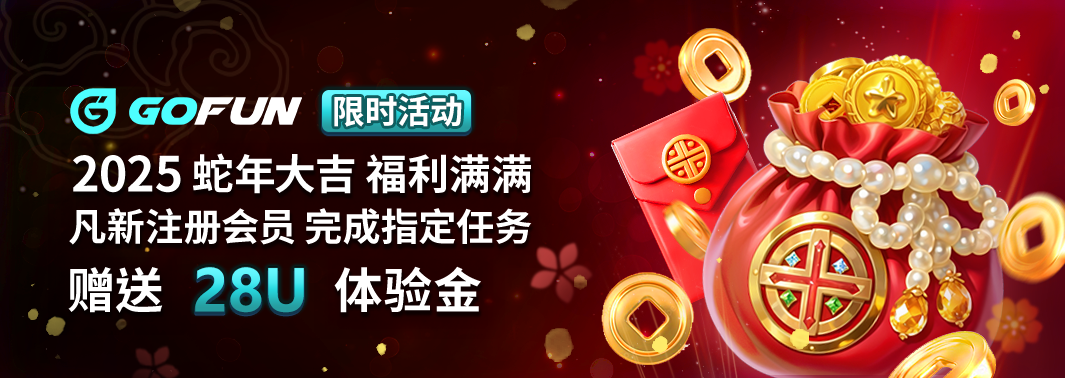
<style>
.page{position:relative;width:1065px;height:378px}
.page>*{position:absolute;margin:0}
.t1{font:32.9px "NotoSansCJKtc-Bold";letter-spacing:-0.01em;color:#ffffff}
.t2{font:41.8px "NotoSansCJKtc-Bold";letter-spacing:-0.01em;color:#ffffff}
.t3{font:48.3px "NotoSansCJKtc-Bold";letter-spacing:-0.01em;color:#ffffff}
.t4{font:38.1px "NotoSansCJKtc-Bold";letter-spacing:-0.01em;color:#ffffff}
.t5{font:48.6px "NotoSansCJKtc-Bold";letter-spacing:-0.01em;color:#ffffff}
</style>
<div class="page">
<p class="t1" style="left:334px;top:95px;width:128px;height:32px">限时活动</p>
<p class="t2" style="left:73px;top:153px;width:458px;height:41px"><span class="t3">2025</span> 蛇年大吉 福利满满</p>
<p class="t4" style="left:69px;top:208px;width:463px;height:37px">凡新注册会员 完成指定任务</p>
<p class="t5" style="left:68px;top:267px;width:95px;height:46px">赠送</p>
<p class="t5" style="left:334px;top:266px;width:147px;height:47px">体验金</p>
</div>
